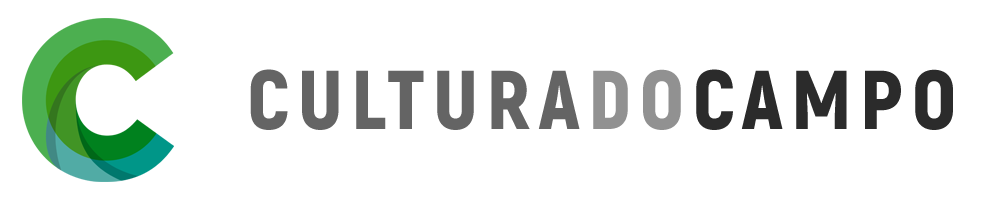
<style>
.page{position:relative;width:1000px;height:200px;background:#ffffff}
.page>*{position:absolute;margin:0}
.t1{font:83.3px "Akrobat-Black";letter-spacing:0.1em;color:#454545;text-transform:uppercase}
.t2{font:83.3px "Akrobat-Black";letter-spacing:0.1em;color:#7b7b7b;text-transform:uppercase}
.t3{font:83.3px "Akrobat-Black";letter-spacing:0.1em;color:#000000;text-transform:uppercase}
</style>
<div class="page">
<p class="t1" style="left:250px;top:69px;width:703px;height:61px;opacity:0.83">cultura<span class="t2">do</span><span class="t3">campo</span></p>
</div>
